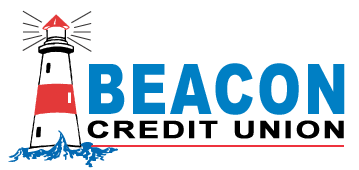
<style>
.page{position:relative;width:359px;height:170px;background:#ffffff}
.page>*{position:absolute;margin:0}
.t1{font:70px "Arial-Black";letter-spacing:0.05em;color:#007fc4;scale:0.76 1}
.t2{font:24px "Arial-BoldMT";letter-spacing:0.075em;color:#000000;font-weight:bold;scale:1.29 1}
</style>
<div class="page">
<p class="t1" style="left:89px;top:63px;width:256px;height:52px">BEACON</p>
<p class="t2" style="left:87px;top:120px;width:257px;height:19px">CREDIT UNION</p>
</div>
